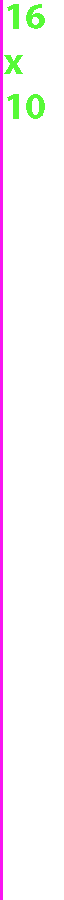
<style>
.page{position:relative;width:64px;height:900px;background:#ffffff}
.page>*{position:absolute;margin:0}
.t1{font:37.8px "MyriadPro-Bold";color:#57fa37}
</style>
<div class="page">
<p class="t1" style="left:4px;top:4px;width:41px;height:115px">16<br>х<br>10</p>
</div>
